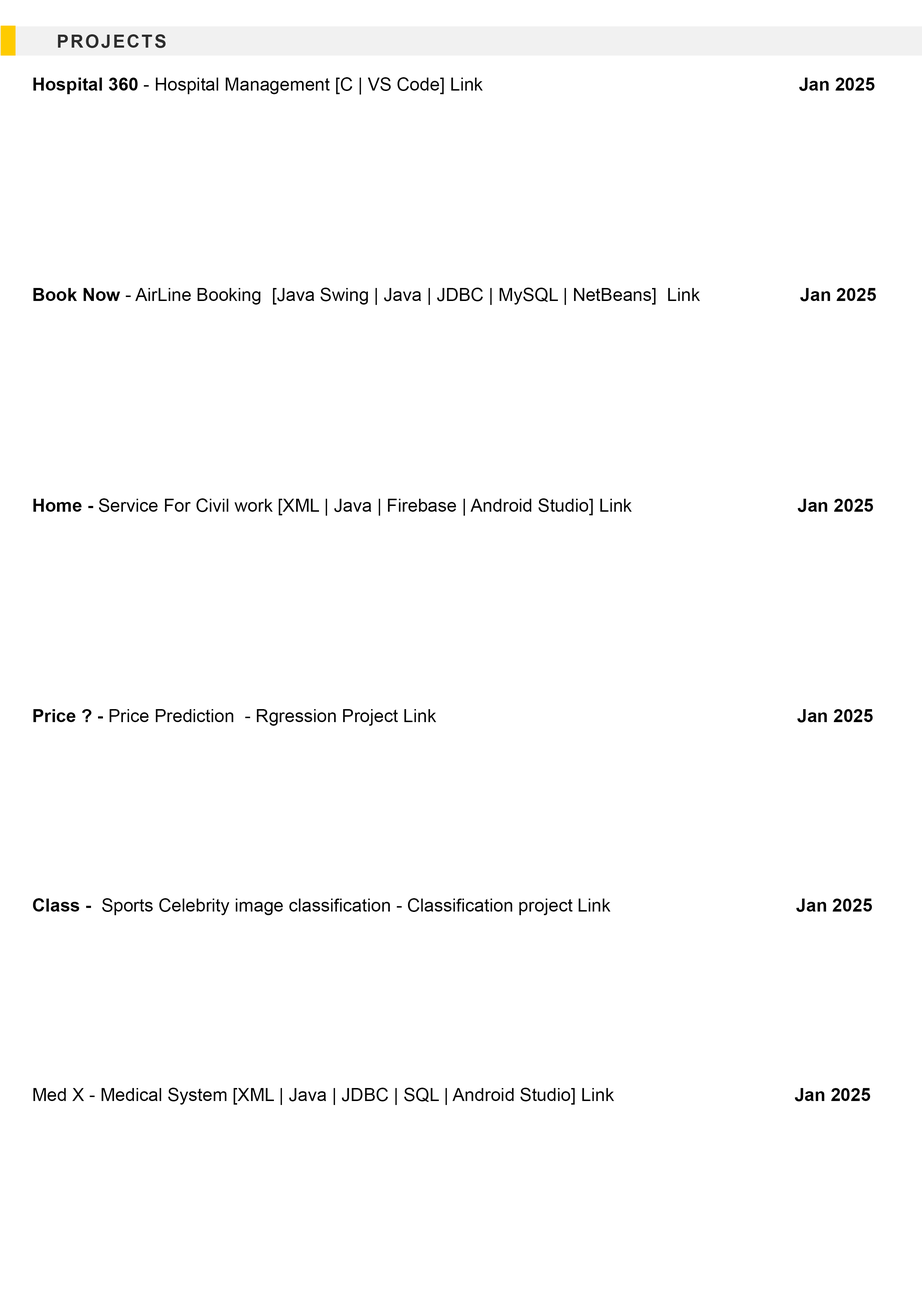
<style>
.page{position:relative;width:922px;height:1293px;background:#ffffff}
.page>*{position:absolute;margin:0}
.t1{font:18px "Arial-BoldMT";letter-spacing:0.1em;color:#2d2d2d;text-transform:uppercase}
.t2{font:18px/21.1px "ArialMT";color:#000000}
.t3{font:18px/21.1px "Arial-BoldMT";color:#000000}
</style>
<div class="page">
<p class="t1" style="left:58px;top:34px;width:108px;height:14px">PROJECTS</p>
<p class="t2" style="left:33px;top:77px;width:843px;height:1028px"><span class="t3">Hospital 360</span> - Hospital Management [C | VS Code] Link                                                               <span class="t3">Jan 2025<br><br><br><br><br><br><br><br><br><br>Book Now</span> - AirLine Booking  [Java Swing | Java | JDBC | MySQL | NetBeans]  Link                    <span class="t3">Jan 2025<br> <br><br><br><br><br><br><br><br><br>Home - </span>Service For Civil work [XML | Java | Firebase | Android Studio] Link                                 <span class="t3">Jan 2025<br><br><br><br><br><br><br><br><br><br>Price ? - </span>Price Prediction  - Rgression Project Link                                                                        <span class="t3">Jan 2025<br><br><br><br><br><br><br><br><br>Class -  </span>Sports Celebrity image classification - Classification project Link                                     <span class="t3">Jan 2025<br><br><br><br><br><br><br><br><br></span>Med X - Medical System [XML | Java | JDBC | SQL | Android Studio] Link                                    <span class="t3">Jan 2025</span></p>
</div>
